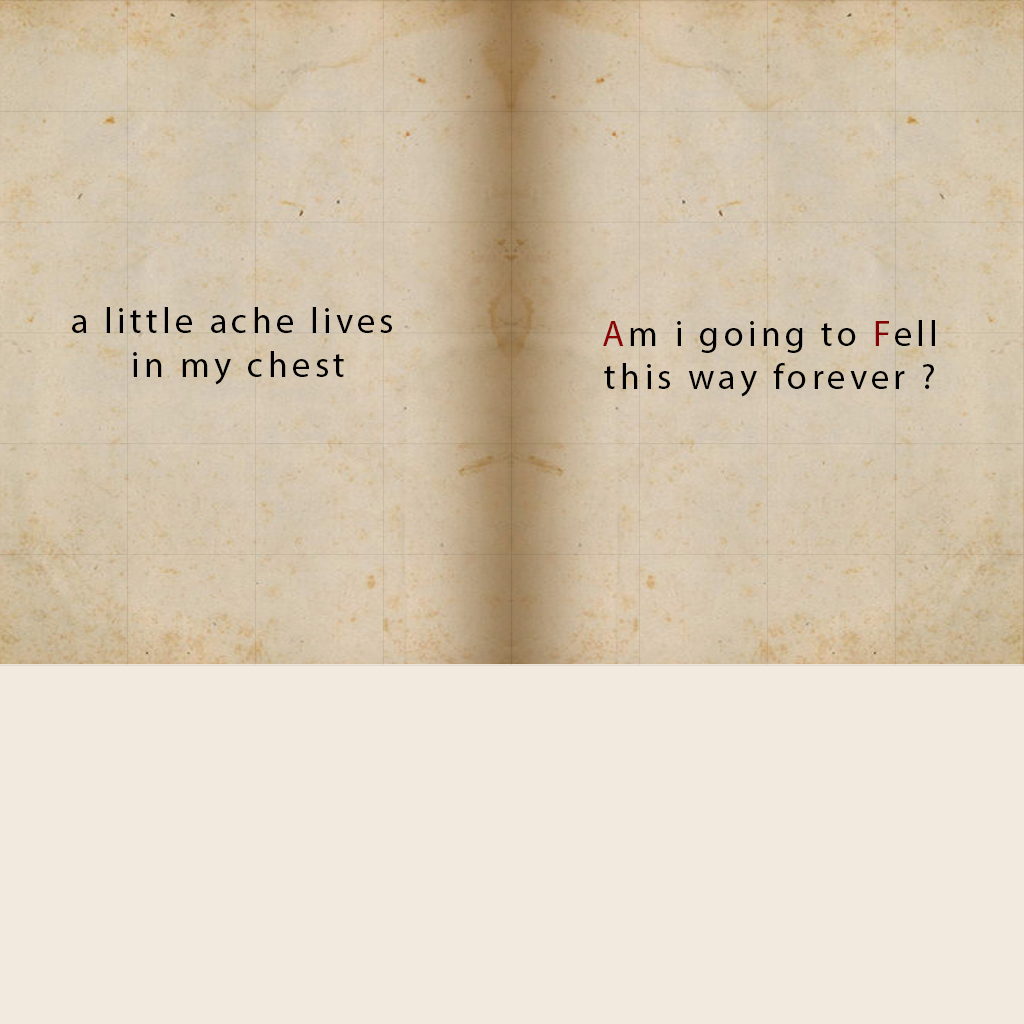
<style>
.page{position:relative;width:1024px;height:1024px;background:#f2eade}
.page>*{position:absolute;margin:0}
.t1{font:36px "MyriadPro-Regular";letter-spacing:0.12em;color:#000000}
.t2{font:36px "MyriadPro-Regular";letter-spacing:0.12em;color:#8b0505}
.t3{font:36px "MyriadPro-Regular";letter-spacing:0.12em;color:#850303}
</style>
<div class="page">
<p class="t1" style="left:72px;top:307px;width:320px;height:78px;text-align:center">a little ache lives<br> in my chest</p>
<p class="t1" style="left:603px;top:320px;width:332px;height:77px;text-align:center"><span class="t2">A</span>m i going to <span class="t3">F</span>ell <br>this way forever ?</p>
</div>
